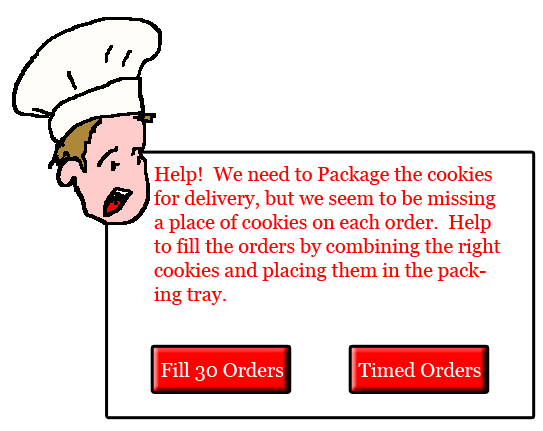
<style>
.page{position:relative;width:543px;height:431px;background:#ffffff}
.page>*{position:absolute;margin:0}
.t1{font:20px "Georgia";color:#ff0000}
.t2{font:20px "Georgia";color:#ffffff}
</style>
<div class="page">
<p class="t1" style="left:154px;top:166px;width:347px;height:139px">Help!  We need to Package the cookies for delivery, but we seem to be missing a place of cookies on each order.  Help to fill the orders by combining the right cookies and placing them in the packing tray.</p>
<p class="t2" style="left:161px;top:362px;width:123px;height:19px">Fill 30 Orders</p>
<p class="t2" style="left:358px;top:362px;width:123px;height:15px">Timed Orders</p>
</div>
